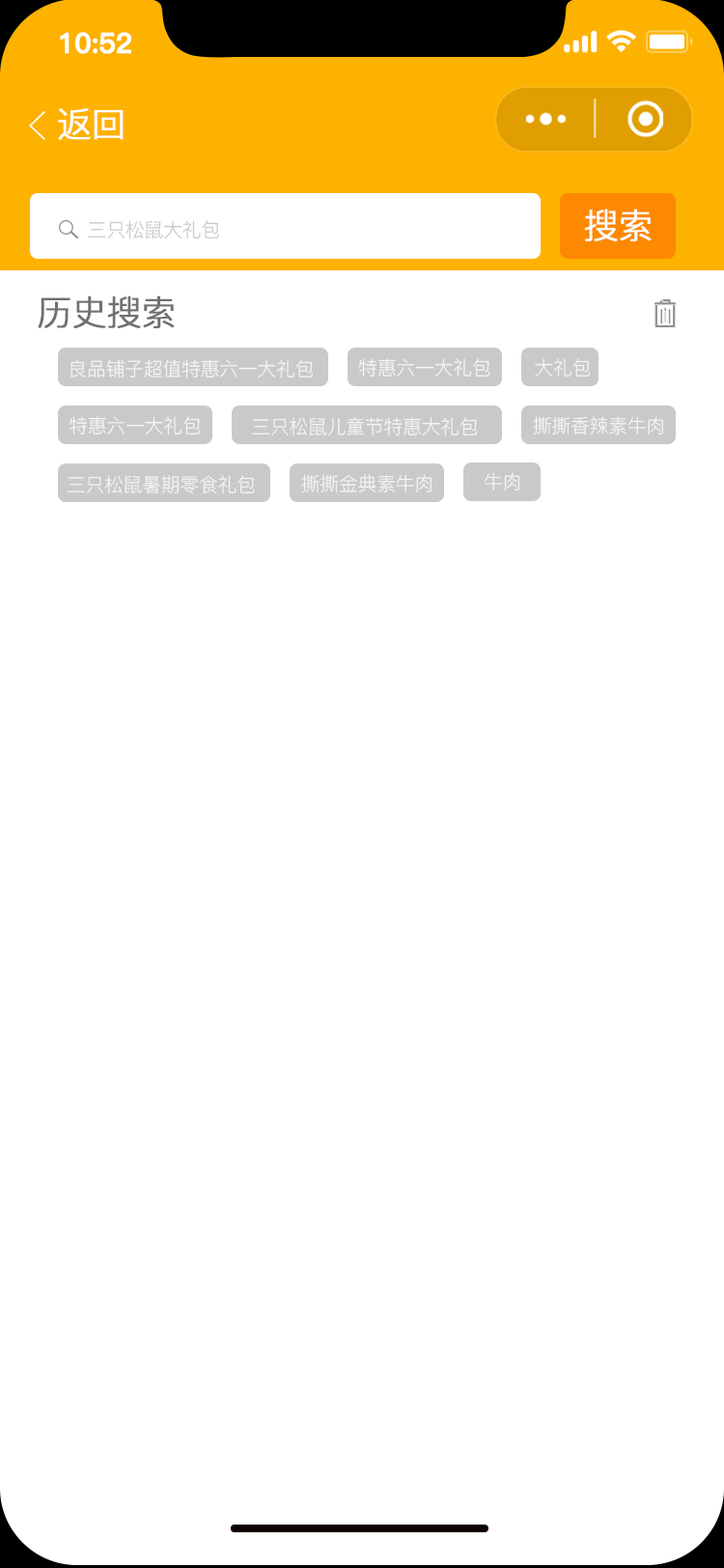
<style>
.page{position:relative;width:724px;height:1568px;background:#ffffff}
.page>*{position:absolute;margin:0}
.t1{font:27.5px "PingFang-SC-Bold";letter-spacing:-0.02em;color:#ffffff;font-weight:bold}
.t2{font:34.8px "PingFang-SC-Regular";letter-spacing:-0.02em;color:#ffffff;font-weight:bold}
.t3{font:19.3px "PingFang-SC-Regular";letter-spacing:-0.02em;color:#c9c9c9}
.t4{font:34.8px "PingFang-SC-Regular";letter-spacing:-0.02em;color:#707070;font-weight:bold}
.t5{font:19.3px "PingFang-SC-Regular";letter-spacing:-0.02em;color:#f4f4f4}
</style>
<div class="page">
<p class="t1" style="left:60px;top:32px;width:71px;height:22px">10:52</p>
<p class="t2" style="left:58px;top:108px;width:66px;height:32px">返回</p>
<p class="t2" style="left:584px;top:209px;width:68px;height:32px">搜索</p>
<p class="t3" style="left:88px;top:220px;width:131px;height:19px">三只松鼠大礼包</p>
<p class="t4" style="left:38px;top:295px;width:137px;height:33px">历史搜索</p>
<p class="t5" style="left:70px;top:359px;width:244px;height:19px">良品铺子超值特惠六一大礼包</p>
<p class="t5" style="left:358px;top:358px;width:132px;height:20px">特惠六一大礼包</p>
<p class="t5" style="left:535px;top:358px;width:56px;height:20px">大礼包</p>
<p class="t5" style="left:69px;top:416px;width:132px;height:19px">特惠六一大礼包</p>
<p class="t5" style="left:251px;top:417px;width:227px;height:19px">三只松鼠儿童节特惠大礼包</p>
<p class="t5" style="left:533px;top:416px;width:130px;height:19px">撕撕香辣素牛肉</p>
<p class="t5" style="left:484px;top:472px;width:36px;height:19px">牛肉</p>
<p class="t5" style="left:67px;top:475px;width:188px;height:19px">三只松鼠暑期零食礼包</p>
<p class="t5" style="left:301px;top:474px;width:131px;height:19px">撕撕金典素牛肉</p>
</div>
